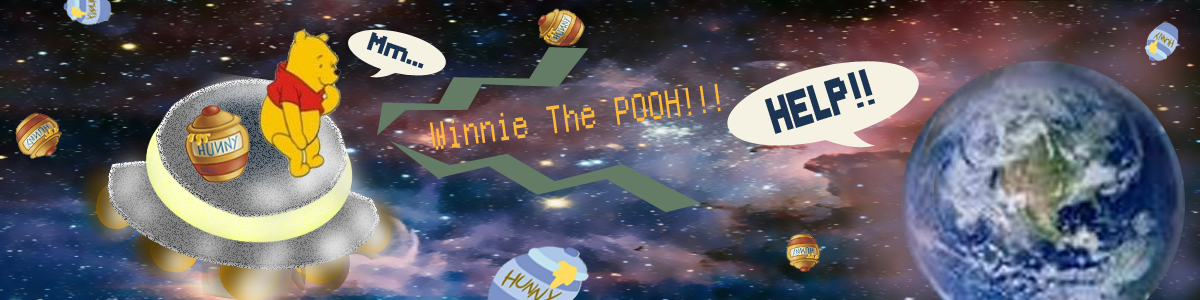
<style>
.page{position:relative;width:1200px;height:300px}
.page>*{position:absolute;margin:0}
.t1{font:18px "Header0865";letter-spacing:-0.005em;color:#1c3351}
.t2{font:36px "Header0865";letter-spacing:-0.005em;color:#1c3351;scale:0.72 1}
.t3{font:27.6px "Mono0856";letter-spacing:-0.005em;color:#fcb83b;scale:0.75 1}
</style>
<div class="page">
<p class="t1" style="left:366px;top:32px;width:58px;height:37px;rotate:19deg">Mm...</p>
<p class="t2" style="left:764px;top:69px;width:112px;height:65px;rotate:-17deg">HELP!!</p>
<p class="t3" style="left:429px;top:83px;width:292px;height:67px;rotate:-8deg">Winnie The POOH!!!</p>
</div>
